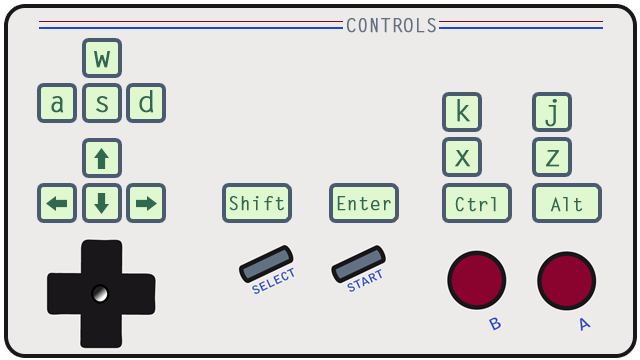
<style>
.page{position:relative;width:640px;height:360px;background:#edeaea}
.page>*{position:absolute;margin:0}
.t1{font:18.2px "LetterGothicStd";color:#617182;font-weight:bold}
.t2{font:29.6px "LetterGothicStd";color:#306850;font-weight:bold}
.t3{font:18px "LetterGothicStd";color:#306850;font-weight:bold}
</style>
<div class="page">
<p class="t1" style="left:347px;top:18px;width:89px;height:15px">CONTROLS</p>
<p class="t2" style="left:94px;top:51px;width:16px;height:17px">w</p>
<p class="t2" style="left:51px;top:96px;width:13px;height:17px">a</p>
<p class="t2" style="left:96px;top:96px;width:12px;height:17px">s</p>
<p class="t2" style="left:139px;top:90px;width:15px;height:23px">d</p>
<p class="t2" style="left:457px;top:99px;width:13px;height:23px">k</p>
<p class="t2" style="left:545px;top:99px;width:12px;height:28px">j</p>
<p class="t2" style="left:455px;top:150px;width:15px;height:17px">x</p>
<p class="t2" style="left:546px;top:150px;width:14px;height:17px">z</p>
<p class="t3" style="left:229px;top:196px;width:56px;height:15px">Shift</p>
<p class="t3" style="left:337px;top:196px;width:54px;height:15px">Enter</p>
<p class="t3" style="left:455px;top:197px;width:41px;height:15px">Ctrl</p>
<p class="t3" style="left:550px;top:197px;width:33px;height:15px">Alt</p>
</div>
